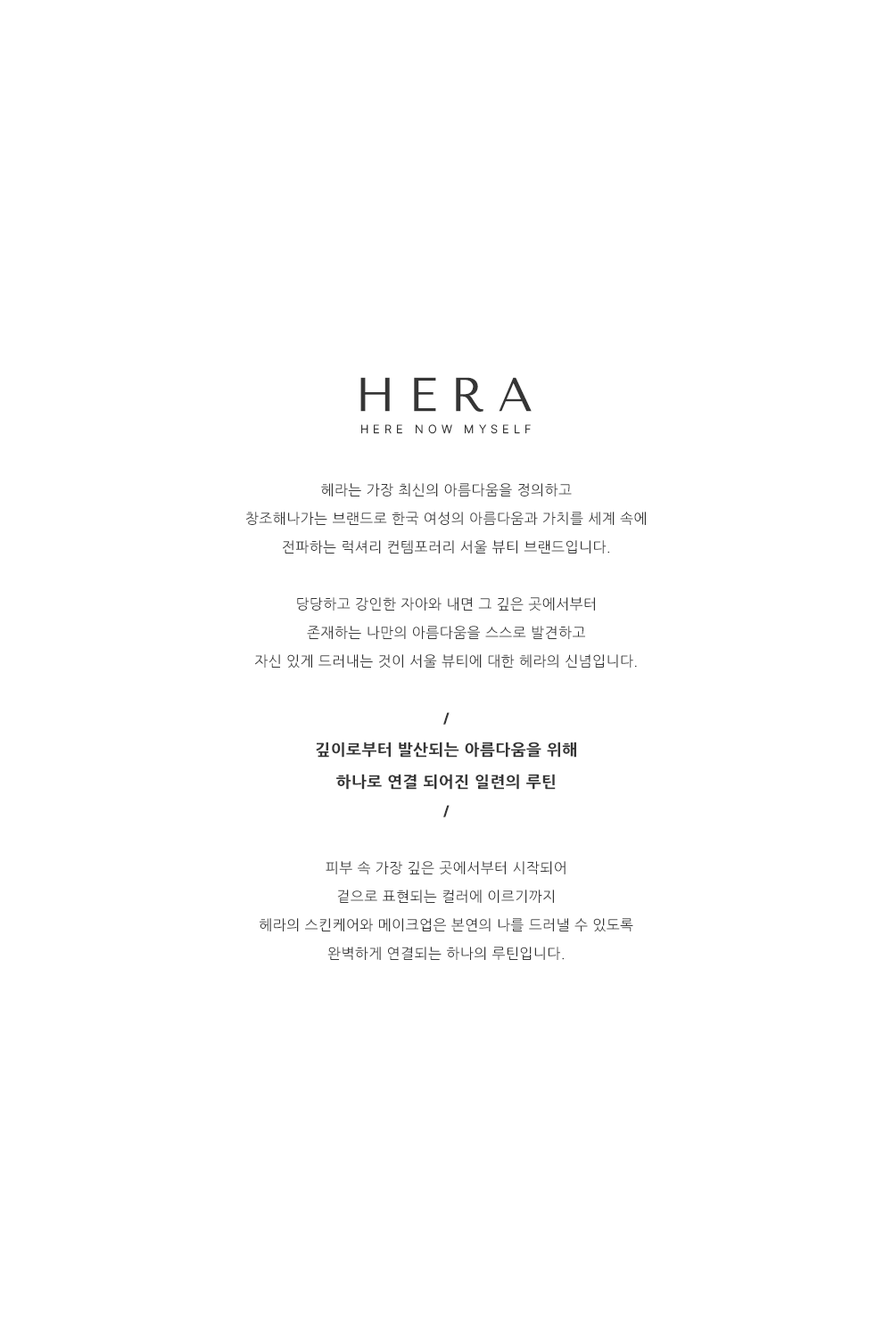
<style>
.page{position:relative;width:892px;height:1337px;background:#ffffff}
.page>*{position:absolute;margin:0}
.t1{font:47.5px "TenorSans";letter-spacing:0.28em;color:#353535;text-transform:uppercase}
.t2{font:11.9px "Pretendard-Light";letter-spacing:0.38em;color:#353535;text-transform:uppercase}
.t3{font:14.3px/28.5px "NanumGothic";letter-spacing:0.025em;color:#353535;text-transform:uppercase}
.t4{font:14.3px/28.5px "NanumGothicExtraBold";letter-spacing:0.025em;color:#353535;text-transform:uppercase}
.t5{font:16px/32.1px "NanumGothicExtraBold";letter-spacing:0.025em;color:#353535;text-transform:uppercase}
</style>
<div class="page">
<p class="t1" style="left:360px;top:377px;width:171px;height:35px">HERA</p>
<p class="t2" style="left:361px;top:424px;width:170px;height:10px">here now myself</p>
<p class="t3" style="left:246px;top:483px;width:400px;height:477px;text-align:center">헤라는 가장 최신의 아름다움을 정의하고<br>창조해나가는 브랜드로 한국 여성의 아름다움과 가치를 세계 속에<br>전파하는 럭셔리 컨템포러리 서울 뷰티 브랜드입니다.<br><br>당당하고 강인한 자아와 내면 그 깊은 곳에서부터<br>존재하는 나만의 아름다움을 스스로 발견하고<br>자신 있게 드러내는 것이 서울 뷰티에 대한 헤라의 신념입니다.<br><br><span class="t4">/<br></span><span class="t5">깊이로부터 발산되는 아름다움을 위해<br>하나로 연결 되어진 일련의 루틴<br></span><span class="t4">/<br></span><br>피부 속 가장 깊은 곳에서부터 시작되어<br>겉으로 표현되는 컬러에 이르기까지<br>헤라의 스킨케어와 메이크업은 본연의 나를 드러낼 수 있도록<br>완벽하게 연결되는 하나의 루틴입니다.</p>
</div>
